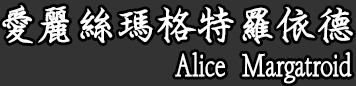
<style>
.page{position:relative;width:356px;height:86px;background:#333333}
.page>*{position:absolute;margin:0}
.t1{font:40px "I.PenCrane-B";color:#ffffff}
.t2{font:32px "I.PenCrane-B";color:#ffffff}
</style>
<div class="page">
<p class="t1" style="left:2px;top:5px;width:351px;height:39px">愛麗絲瑪格特羅依德</p>
<p class="t2" style="left:175px;top:52px;width:177px;height:32px">Alice Margatroid</p>
</div>
